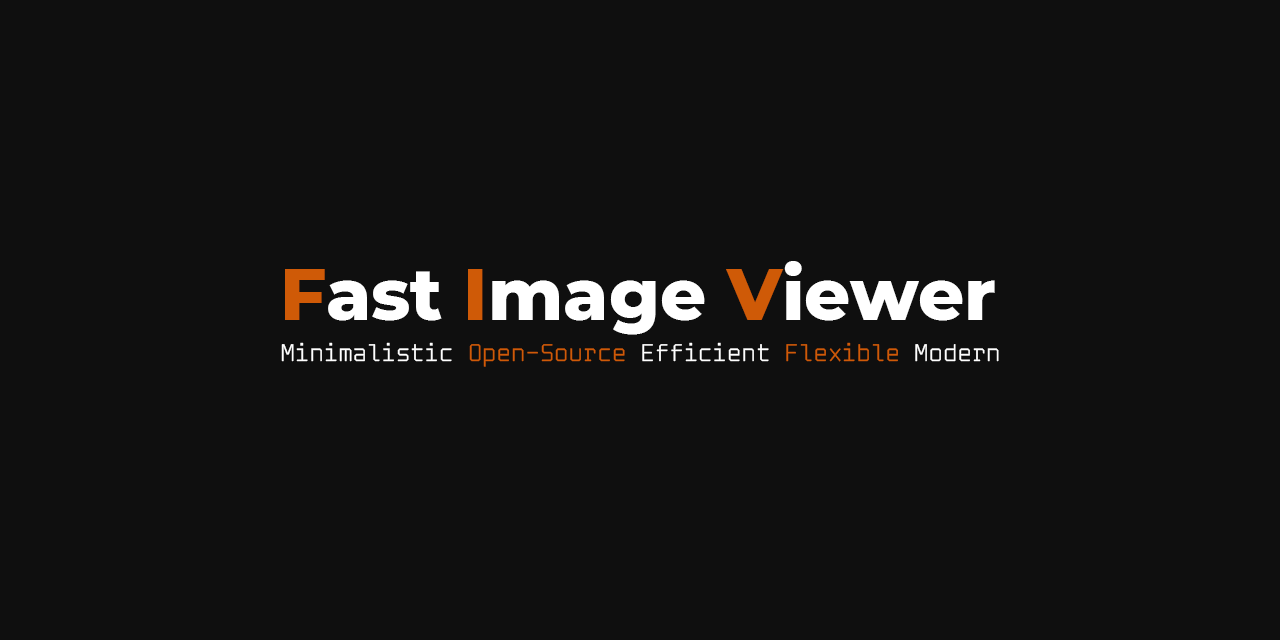
<style>
.page{position:relative;width:1280px;height:640px;background:#0f0f0f}
.page>*{position:absolute;margin:0}
.t1{font:72px "Montserrat-ExtraBold";color:#ffffff}
.t2{font:72px "Montserrat-ExtraBold";color:#cf5a07}
.t3{font:24px "SolidMonoRegular";color:#ffffff}
.t4{font:24px "SolidMonoRegular";color:#cf5a07}
</style>
<div class="page">
<p class="t1" style="left:285px;top:261px;width:710px;height:74px"><span class="t2">F</span>ast <span class="t2">I</span>mage <span class="t2">V</span>iewer</p>
<p class="t3" style="left:281px;top:342px;width:718px;height:25px">Minimalistic<span class="t4"> Open-Source </span>Efficient<span class="t4"> Flexible </span>Modern</p>
</div>
